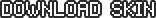
<style>
.page{position:relative;width:156px;height:18px;background:#2a2a2a}
.page>*{position:absolute;margin:0}
.t1{font:18px "VolterGoldfish";color:#ffffff}
</style>
<div class="page">
<p class="t1" style="left:2px;top:2px;width:152px;height:14px">DOWNLOAD SKIN</p>
</div>
